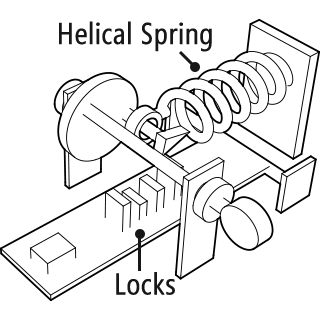
<style>
.page{position:relative;width:320px;height:320px;background:#ffffff}
.page>*{position:absolute;margin:0}
.t1{font:30px "SegoeCondensed";color:#171717;font-weight:bold}
</style>
<div class="page">
<p class="t1" style="left:59px;top:21px;width:153px;height:31px">Helical Spring</p>
<p class="t1" style="left:116px;top:272px;width:59px;height:23px">Locks</p>
</div>
